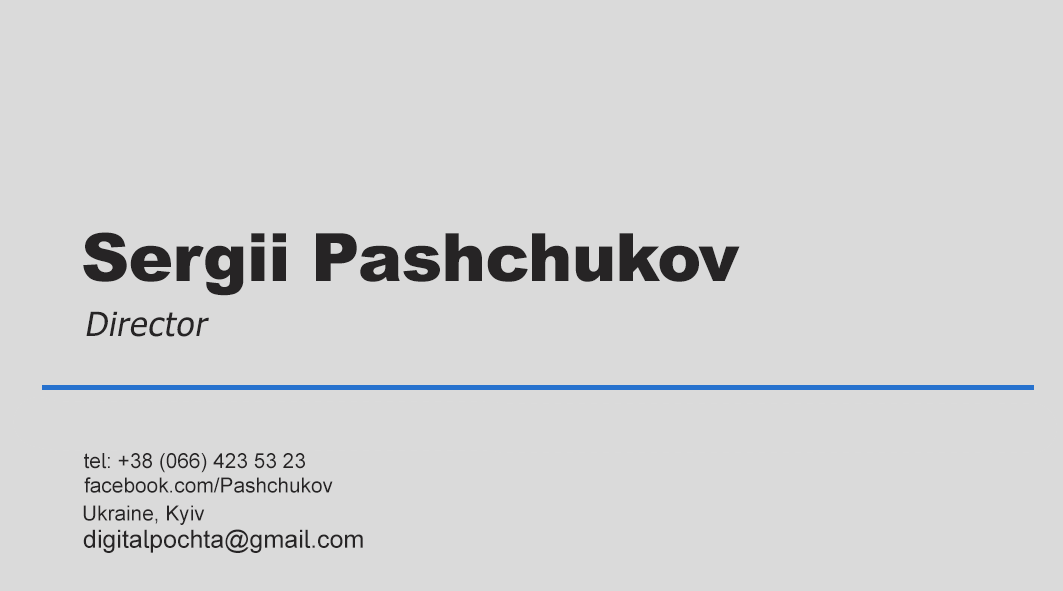
<style>
.page{position:relative;width:1063px;height:591px;background:#dadada}
.page>*{position:absolute;margin:0}
.t1{font:66.7px "Arial-Black";letter-spacing:-0.01em;color:#262425}
.t2{font:33.3px "Tahoma";letter-spacing:0.025em;color:#262425;font-style:italic}
.t3{font:20.8px "ArialMT";color:#262425}
.t4{font:25px "ArialMT";color:#262425}
</style>
<div class="page">
<p class="t1" style="left:83px;top:232px;width:657px;height:64px">Sergii Pashchukov</p>
<p class="t2" style="left:86px;top:311px;width:123px;height:26px">Director</p>
<p class="t3" style="left:84px;top:453px;width:221px;height:20px">tel: +38 (066) 423 53 23</p>
<p class="t3" style="left:84px;top:477px;width:249px;height:16px">facebook.com/Pashchukov</p>
<p class="t3" style="left:83px;top:505px;width:122px;height:20px">Ukraine, Kyiv</p>
<p class="t4" style="left:83px;top:529px;width:280px;height:24px">digitalpochta@gmail.com</p>
</div>
